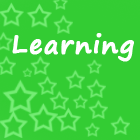
<style>
.page{position:relative;width:140px;height:140px;background:#33cc33}
.page>*{position:absolute;margin:0}
.t1{font:25.5px "SegoePrint-Bold";letter-spacing:0.025em;color:#ffffff;font-weight:bold}
</style>
<div class="page">
<p class="t1" style="left:12px;top:33px;width:122px;height:29px">Learning</p>
</div>
